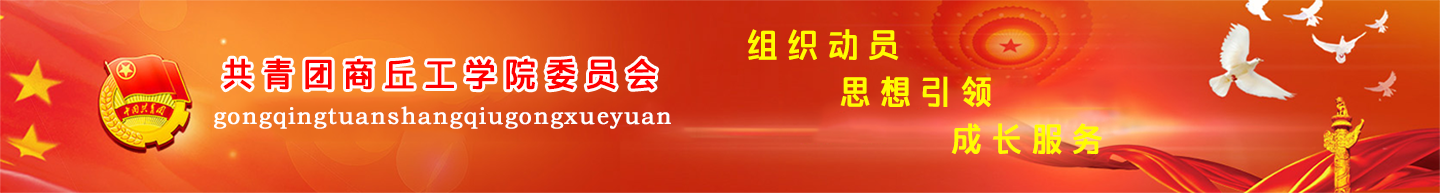
<style>
.page{position:relative;width:1440px;height:193px}
.page>*{position:absolute;margin:0}
.t1{font:30.9px/47px "MFDianHei_Noncommercial-Regular";letter-spacing:0.359em;color:#fffc00;text-transform:uppercase;font-weight:bold;scale:0.94 1}
.t2{font:30.9px "MFDianHei_Noncommercial-Regular";letter-spacing:0.359em;color:#ff0000;text-transform:uppercase;font-weight:bold;scale:0.94 1}
.t3{font:24px "STZhongsong";letter-spacing:0.059em;color:#ffffff;font-weight:bold;scale:0.94 1}
</style>
<div class="page">
<p class="t1" style="left:748px;top:29px;width:354px;height:126px">组织动员 <br>     思想引领<br>           成长服务</p>
<p class="t2" style="left:223px;top:58px;width:434px;height:32px">共青团商丘工学院委员会</p>
<p class="t3" style="left:214px;top:106px;width:457px;height:23px">gongqingtuanshangqiugongxueyuan</p>
</div>
